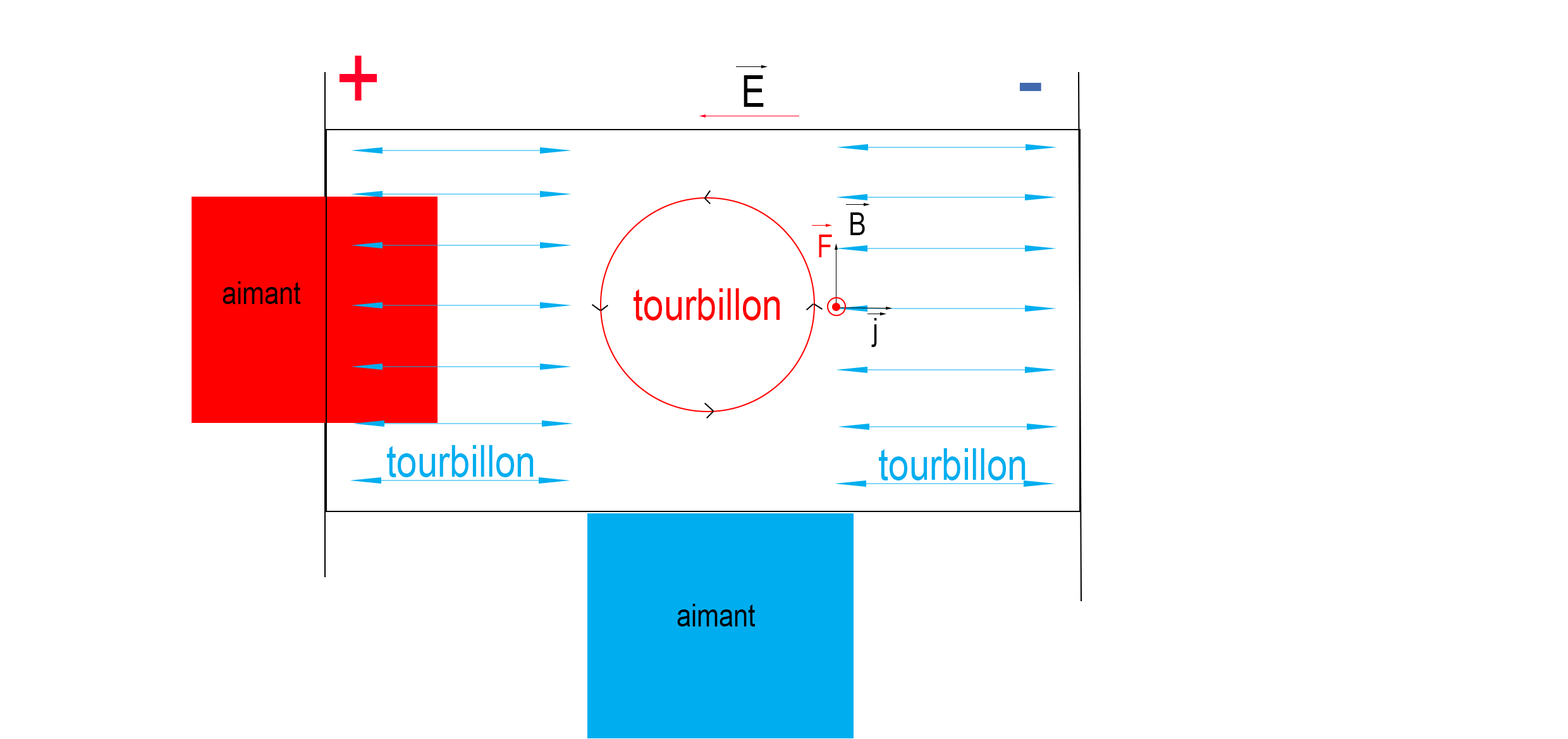
<style>
.page{position:relative;width:1568px;height:739px;background:#ffffff}
.page>*{position:absolute;margin:0}
.t1{font:94.8px "ArialMT";color:#ff002a;scale:0.83 1}
.t2{font:44.3px "ArialMT";color:#000000;scale:0.83 1}
.t3{font:94.8px "ArialMT";color:#416aae;scale:0.83 1}
.t4{font:31.6px "ArialMT";color:#000000;scale:0.83 1}
.t5{font:31.6px "ArialMT";color:#ff0000;scale:0.83 1}
.t6{font:44.3px "ArialMT";color:#ff0000;scale:0.83 1}
.t7{font:44.3px "ArialMT";color:#00aeef;scale:0.83 1}
</style>
<div class="page">
<p class="t1" style="left:339px;top:56px;width:38px;height:45px">+</p>
<p class="t2" style="left:744px;top:75px;width:20px;height:32px">E</p>
<p class="t3" style="left:1019px;top:83px;width:22px;height:8px">-</p>
<p class="t4" style="left:850px;top:212px;width:15px;height:23px">B</p>
<p class="t5" style="left:819px;top:235px;width:13px;height:22px">F</p>
<p class="t4" style="left:223px;top:281px;width:78px;height:23px">aimant</p>
<p class="t6" style="left:634px;top:288px;width:146px;height:33px">tourbillon</p>
<p class="t4" style="left:871px;top:318px;width:6px;height:29px">j</p>
<p class="t7" style="left:387px;top:445px;width:147px;height:32px">tourbillon</p>
<p class="t7" style="left:879px;top:448px;width:147px;height:33px">tourbillon</p>
<p class="t4" style="left:677px;top:604px;width:79px;height:23px">aimant</p>
</div>
